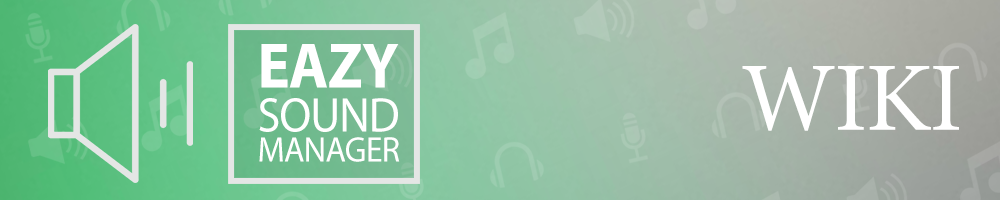
<style>
.page{position:relative;width:1000px;height:200px}
.page>*{position:absolute;margin:0}
.t1{font:64.5px "MyriadPro-Bold";letter-spacing:-0.02em;color:#ffffff;scale:0.94 1}
.t2{font:98.1px "MinionPro-Regular";letter-spacing:-0.02em;color:#ffffff}
.t3{font:48.8px "MyriadPro-Regular";letter-spacing:-0.02em;color:#ffffff;scale:0.95 1}
.t4{font:35.6px "MyriadPro-Regular";letter-spacing:-0.02em;color:#ffffff;scale:0.95 1}
</style>
<div class="page">
<p class="t1" style="left:261px;top:44px;width:138px;height:44px">EAZY</p>
<p class="t2" style="left:742px;top:66px;width:217px;height:65px">WIKI</p>
<p class="t3" style="left:259px;top:98px;width:139px;height:34px">SOUND</p>
<p class="t4" style="left:259px;top:137px;width:141px;height:25px">MANAGER</p>
</div>
